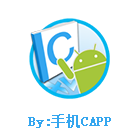
<style>
.page{position:relative;width:140px;height:140px;background:#ffffff}
.page>*{position:absolute;margin:0}
.t1{font:14px "SimSun";color:#34a6ef;font-weight:bold}
</style>
<div class="page">
<p class="t1" style="left:28px;top:114px;width:83px;height:14px">By:手机CAPP</p>
</div>
